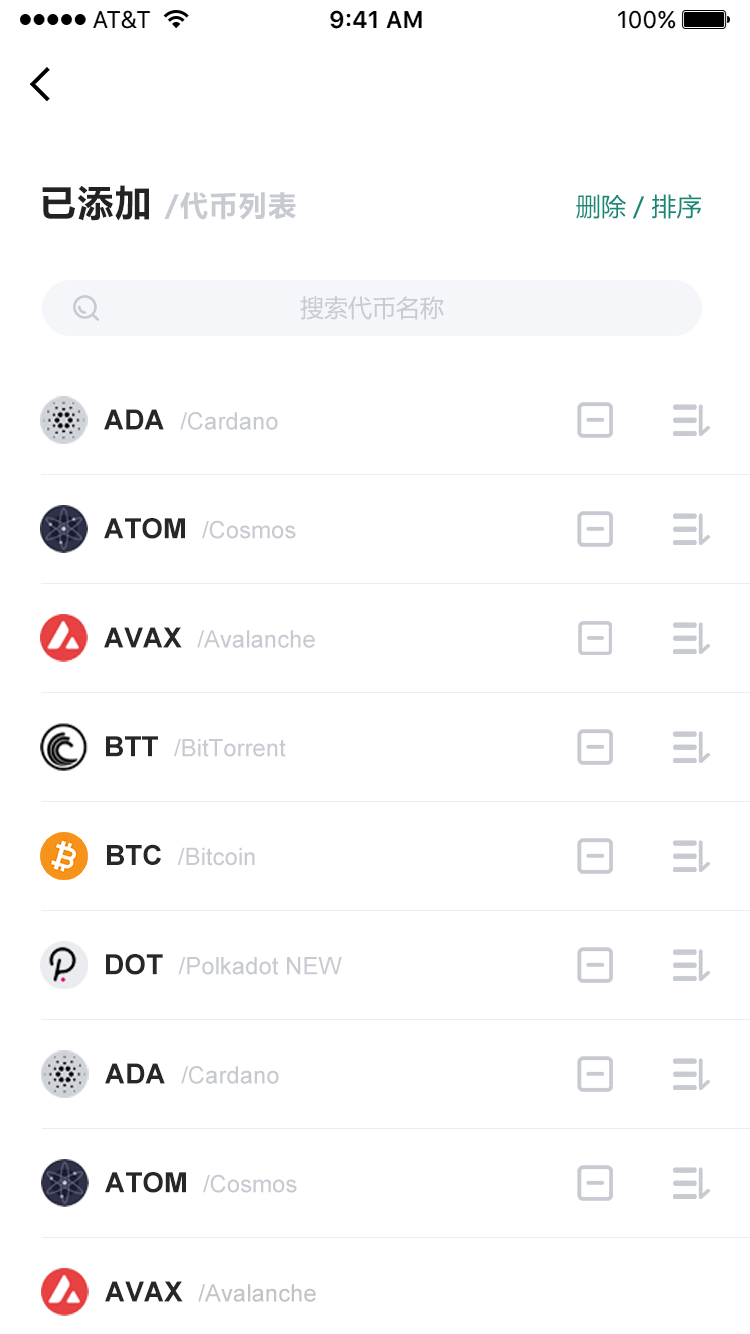
<style>
.page{position:relative;width:750px;height:1334px;background:#ffffff}
.page>*{position:absolute;margin:0}
.t1{font:28px "MicrosoftYaHei-Bold";letter-spacing:0.05em;color:#c8cad2}
.t2{font:36px "MicrosoftYaHei-Bold";letter-spacing:0.05em;color:#222222}
.t3{font:25px "MicrosoftYaHei";color:#158878}
.t4{font:24px "MicrosoftYaHei";color:#c8cad2}
.t5{font:24px "ArialMT";color:#c8cad2}
.t6{font:28px "Arial-BoldMT";color:#272727}
.t7{font:24px "ArialMT";color:#c7c9d1}
.t8{font:24px "ArialMT";color:#c2c3c3}
</style>
<div class="page">
<p class="t1" style="left:42px;top:185px;width:254px;height:36px"><span class="t2">已添加 </span>/代币列表</p>
<p class="t3" style="left:576px;top:194px;width:125px;height:25px">删除 / 排序</p>
<p class="t4" style="left:300px;top:296px;width:144px;height:24px">搜索代币名称</p>
<p class="t5" style="left:104px;top:409px;width:174px;height:21px"><span class="t6">ADA  </span>/Cardano</p>
<p class="t5" style="left:104px;top:518px;width:192px;height:21px"><span class="t6">ATOM  </span>/Cosmos</p>
<p class="t5" style="left:104px;top:627px;width:211px;height:21px"><span class="t6">AVAX  </span>/Avalanche</p>
<p class="t5" style="left:106px;top:736px;width:180px;height:21px"><span class="t6">BTT  </span>/BitTorrent</p>
<p class="t5" style="left:107px;top:844px;width:148px;height:22px"><span class="t6">BTC  </span>/Bitcoin</p>
<p class="t5" style="left:106px;top:954px;width:236px;height:21px"><span class="t6">DOT  </span>/Polkadot NEW</p>
<p class="t7" style="left:105px;top:1063px;width:174px;height:21px"><span class="t6">ADA  </span>/Cardano</p>
<p class="t5" style="left:105px;top:1172px;width:192px;height:21px"><span class="t6">ATOM  </span>/Cosmos</p>
<p class="t8" style="left:105px;top:1281px;width:211px;height:21px"><span class="t6">AVAX  </span>/Avalanche</p>
</div>
